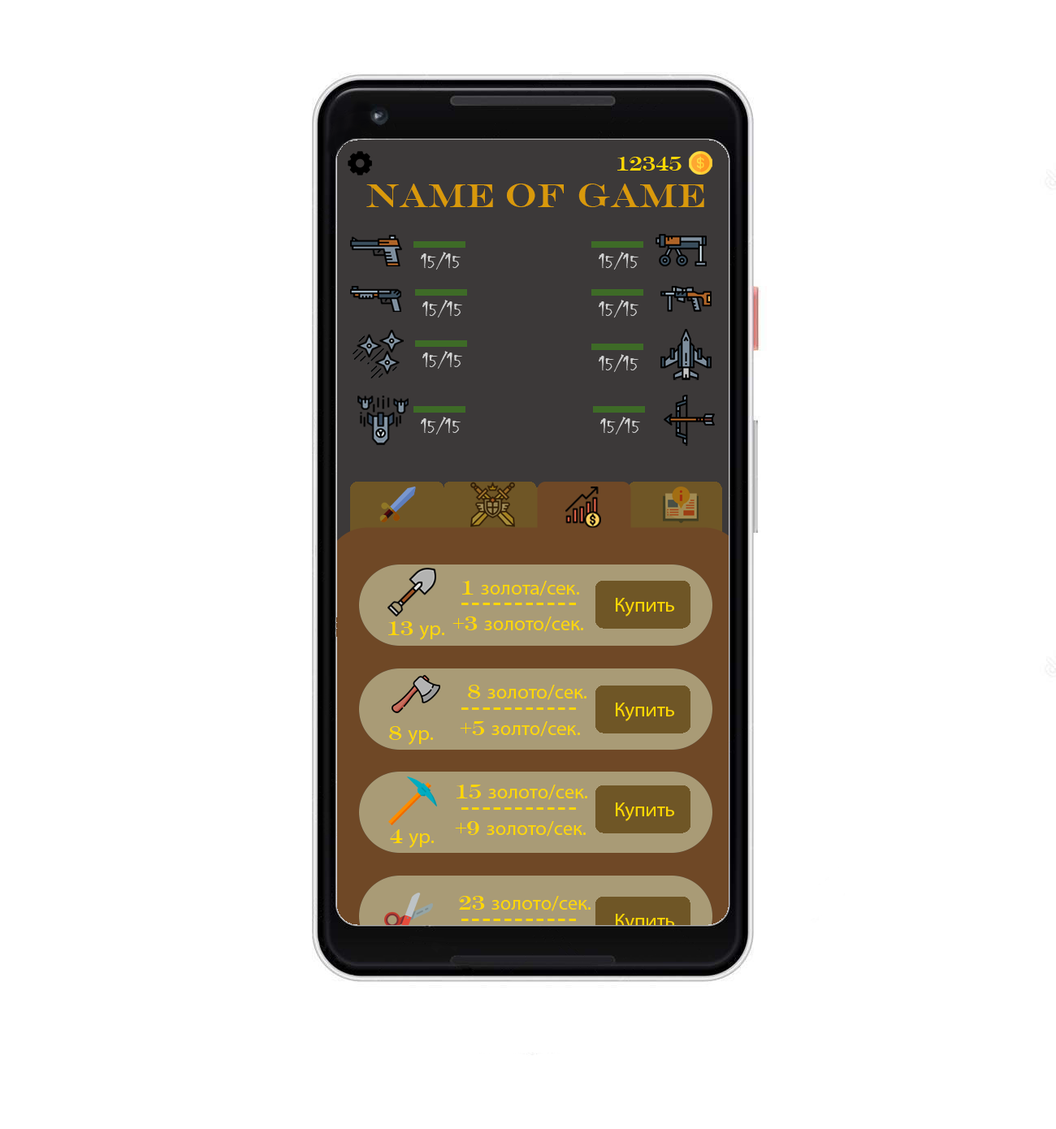
<style>
.page{position:relative;width:1056px;height:1129px;background:#ffffff}
.page>*{position:absolute;margin:0}
.t1{font:20.3px "EngraversMT";color:#ffd700}
.t2{font:33.8px "EngraversMT";color:#d9990b}
.t3{font:20.3px "Chiller-Regular";color:#d0d0d0}
.t4{font:20.3px "MyriadPro-Regular";color:#ffd700}
</style>
<div class="page">
<p class="t1" style="left:617px;top:157px;width:65px;height:14px">12345</p>
<p class="t2" style="left:366px;top:184px;width:338px;height:23px">Name of Game</p>
<p class="t3" style="left:421px;top:252px;width:40px;height:18px">15/15</p>
<p class="t3" style="left:599px;top:252px;width:39px;height:18px">15/15</p>
<p class="t3" style="left:422px;top:300px;width:40px;height:18px">15/15</p>
<p class="t3" style="left:599px;top:300px;width:39px;height:18px">15/15</p>
<p class="t3" style="left:422px;top:351px;width:40px;height:18px">15/15</p>
<p class="t3" style="left:599px;top:354px;width:39px;height:18px">15/15</p>
<p class="t3" style="left:421px;top:417px;width:40px;height:18px">15/15</p>
<p class="t3" style="left:600px;top:417px;width:40px;height:18px">15/15</p>
<p class="t4" style="left:462px;top:581px;width:117px;height:15px"><span class="t1">1 </span>золота/сек.</p>
<p class="t1" style="left:461px;top:603px;width:115px;height:2px">-----------</p>
<p class="t4" style="left:616px;top:598px;width:58px;height:19px">Купить</p>
<p class="t4" style="left:452px;top:617px;width:131px;height:15px"><span class="t1">+3 </span>золото/сек.</p>
<p class="t4" style="left:388px;top:621px;width:56px;height:19px"><span class="t1">13 </span>ур.</p>
<p class="t4" style="left:468px;top:685px;width:119px;height:15px"><span class="t1">8 </span>золото/сек.</p>
<p class="t1" style="left:461px;top:708px;width:115px;height:2px">-----------</p>
<p class="t4" style="left:616px;top:703px;width:58px;height:18px">Купить</p>
<p class="t4" style="left:460px;top:721px;width:120px;height:16px"><span class="t1">+5 </span>золто/сек.</p>
<p class="t4" style="left:389px;top:726px;width:44px;height:19px"><span class="t1">8 </span>ур.</p>
<p class="t4" style="left:457px;top:785px;width:130px;height:15px"><span class="t1">15 </span>золото/сек.</p>
<p class="t1" style="left:461px;top:807px;width:115px;height:3px">-----------</p>
<p class="t4" style="left:616px;top:803px;width:58px;height:18px">Купить</p>
<p class="t4" style="left:455px;top:821px;width:131px;height:16px"><span class="t1">+9 </span>золото/сек.</p>
<p class="t4" style="left:390px;top:829px;width:44px;height:19px"><span class="t1">4 </span>ур.</p>
<p class="t4" style="left:459px;top:896px;width:132px;height:15px"><span class="t1">23 </span>золото/сек.</p>
<p class="t4" style="left:616px;top:914px;width:58px;height:19px">Купить</p>
<p class="t1" style="left:461px;top:919px;width:115px;height:2px">-----------</p>
</div>
